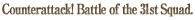
<style>
.page{position:relative;width:195px;height:20px;background:#ffffff}
.page>*{position:absolute;margin:0}
.t1{font:14px "RyuminPro-ExBold";letter-spacing:-0.08em;color:#6e5941;font-weight:bold;scale:0.8 1}
</style>
<div class="page">
<p class="t1" style="left:2px;top:3px;width:191px;height:14px">Counterattack! Battle of the 31st Squad.</p>
</div>
